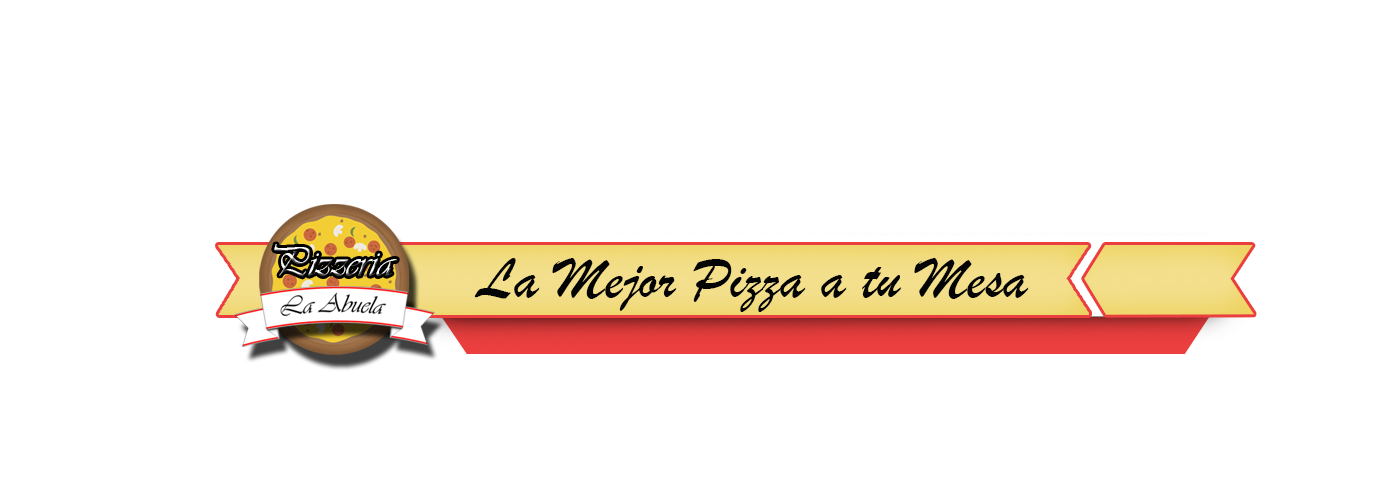
<style>
.page{position:relative;width:1400px;height:500px;background:#ffffff}
.page>*{position:absolute;margin:0}
.t1{font:60px "BrushScriptMT";color:#040404}
</style>
<div class="page">
<p class="t1" style="left:474px;top:258px;width:555px;height:54px">La Mejor Pizza a tu Mesa</p>
</div>
